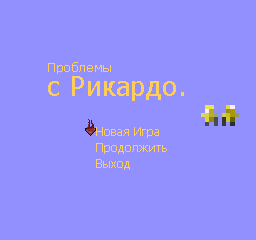
<style>
.page{position:relative;width:256px;height:240px;background:#9290ff}
.page>*{position:absolute;margin:0}
.t1{font:12.5px "Tahoma";color:#ffcd59;scale:1.04 1}
.t2{font:26.5px "Tahoma";color:#ffcd59;scale:1.04 1}
.t3{font:12px "Tahoma";color:#ffcd59}
</style>
<div class="page">
<p class="t1" style="left:48px;top:62px;width:63px;height:12px">Проблемы</p>
<p class="t2" style="left:48px;top:76px;width:136px;height:25px">с Рикардо.</p>
<p class="t3" style="left:96px;top:127px;width:63px;height:11px">Новая Игра</p>
<p class="t3" style="left:96px;top:143px;width:71px;height:11px">Продолжить</p>
<p class="t3" style="left:96px;top:159px;width:34px;height:11px">Выход</p>
</div>
